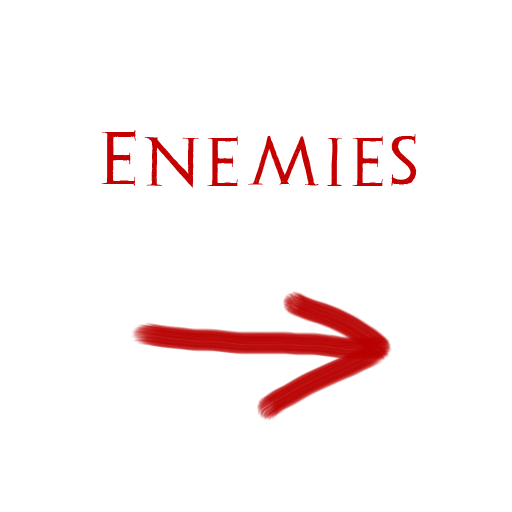
<style>
.page{position:relative;width:512px;height:512px;background:#ffffff}
.page>*{position:absolute;margin:0}
.t1{font:58.3px "Archeologicaps";color:#c40000}
</style>
<div class="page">
<p class="t1" style="left:101px;top:130px;width:316px;height:58px">Enemies</p>
</div>
